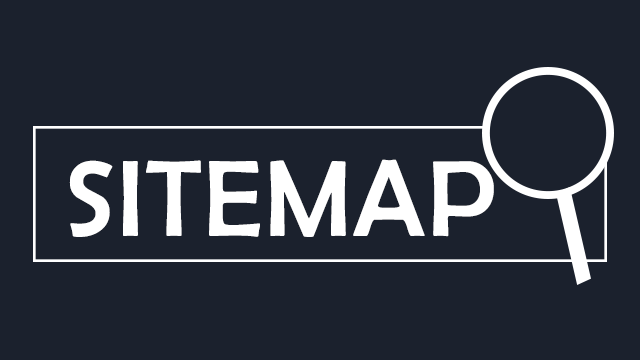
<style>
.page{position:relative;width:640px;height:360px;background:#1b212d}
.page>*{position:absolute;margin:0}
.t1{font:109px "BerlinSansFB-Reg";letter-spacing:0.02em;color:#ffffff}
</style>
<div class="page">
<p class="t1" style="left:69px;top:159px;width:425px;height:78px">SITEMAP</p>
</div>
